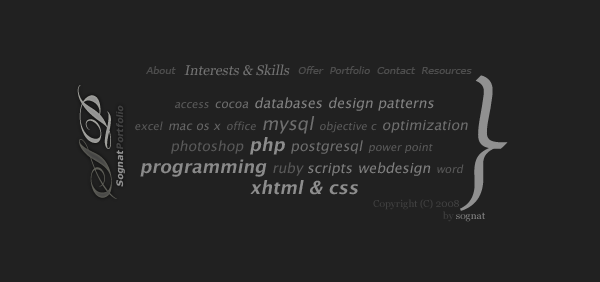
<style>
.page{position:relative;width:600px;height:282px;background:#212121}
.page>*{position:absolute;margin:0}
.t1{font:14px "Georgia";color:#727272;font-style:italic}
.t2{font:10px "Verdana";letter-spacing:-0.01em;color:#4d4d4d;font-style:italic}
.t3{font:124px "Apple-Chancery";letter-spacing:0.05em;color:#909090}
.t4{font:72px "BickhamScriptPro-Bold";letter-spacing:0.05em;color:#9a9a98}
.t5{font:14px "LucidaGrande";color:#818181;font-style:italic}
.t6{font:11px "LucidaGrande";color:#595959;font-style:italic}
.t7{font:12px "LucidaGrande";color:#6d6d6d;font-style:italic}
.t8{font:12px "LucidaGrande";color:#666666;font-style:italic}
.t9{font:18px "LucidaGrande";color:#6e6e6e;font-style:italic}
.t10{font:14px "LucidaGrande";color:#6e6e6e;font-style:italic}
.t11{font:14px "LucidaGrande";color:#595959;font-style:italic}
.t12{font:18px "LucidaGrande-Bold";color:#8c8c8c;font-style:italic}
.t13{font:18px "LucidaGrande-Bold";color:#8a8a8a;font-style:italic}
.t14{font:14px "LucidaGrande";color:#7e7e7e;font-style:italic}
.t15{font:14px "LucidaGrande";color:#7f7f7f;font-style:italic}
.t16{font:18px "LucidaGrande-Bold";color:#8d8d8d;font-style:italic}
.t17{font:9px "Verdana-Bold";color:#424242;font-style:italic}
.t18{font:72px "BickhamScriptPro-Bold";letter-spacing:0.05em;color:#50504d}
.t19{font:9px "Verdana-Bold";color:#909090;font-style:italic}
.t20{font:10px "Georgia";color:#414141}
.t21{font:10px "Georgia";color:#838383}
</style>
<div class="page">
<p class="t1" style="left:184px;top:64px;width:106px;height:12px">Interests &amp; Skills</p>
<p class="t2" style="left:146px;top:66px;width:326px;height:8px">About                                    Offer  Portfolio  Contact  Resources</p>
<p class="t3" style="left:460px;top:75px;width:48px;height:136px">}</p>
<p class="t4" style="left:77px;top:85px;width:34px;height:64px;rotate:-90deg">P</p>
<p class="t5" style="left:135px;top:97px;width:333px;height:98px;text-align:center"><span class="t6">access </span><span class="t7">cocoa </span>databases design patterns<br><span class="t6">excel </span><span class="t8">mac os x </span><span class="t6">office </span><span class="t9">mysql </span><span class="t6">objective c </span><span class="t10">optimization <br></span><span class="t11">photoshop </span><span class="t12">php </span><span class="t10">postgresql </span><span class="t6">power point <br></span><span class="t13">programming </span><span class="t11">ruby </span><span class="t14">scripts </span><span class="t15">webdesign </span><span class="t6">word <br></span><span class="t16">xhtml &amp; css</span></p>
<p class="t17" style="left:116px;top:105px;width:8px;height:45px;rotate:-90deg">Portfolio</p>
<p class="t18" style="left:79px;top:139px;width:38px;height:60px;rotate:-90deg">S</p>
<p class="t19" style="left:116px;top:150px;width:9px;height:37px;rotate:-90deg">Sognat</p>
<p class="t20" style="left:373px;top:199px;width:112px;height:23px">Copyright (C) 2008<br>                             by <span class="t21">sognat</span></p>
</div>
